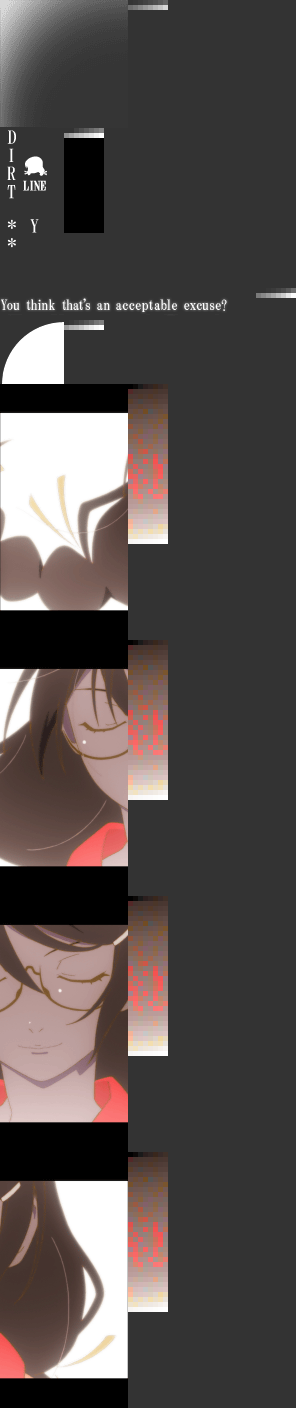
<style>
.page{position:relative;width:296px;height:1408px;background:#333333}
.page>*{position:absolute;margin:0}
.t1{font:18px/24px "HGMinchoB";letter-spacing:0.01em;color:#ffffff}
.t2{font:13px "HGMinchoB";letter-spacing:-0.075em;color:#ffffff;font-weight:bold}
.t3{font:13px "HGMinchoB";letter-spacing:-0.15em;color:#ffffff;font-weight:bold}
.t4{font:13px "HGMinchoB";letter-spacing:-0.05em;color:#ffffff;font-weight:bold}
.t5{font:18px "HGMinchoB";letter-spacing:0.01em;color:#ffffff}
.t6{font:14px "HGMinchoB";letter-spacing:-0.025em;color:#ffffff}
.t7{font:14px "HGMinchoB";letter-spacing:-0.1em;color:#ffffff}
.t8{font:14px "HGMinchoB";letter-spacing:-0.075em;color:#ffffff}
.t9{font:14px "HGMinchoB";letter-spacing:-0.2em;color:#ffffff}
</style>
<div class="page">
<p class="t1" style="left:7px;top:130px;width:9px;height:118px">DIRT  **</p>
<p class="t2" style="left:23px;top:180px;width:23px;height:11px">L<span class="t3">I</span><span class="t4">N</span>E</p>
<p class="t5" style="left:30px;top:219px;width:9px;height:14px">Y</p>
<p class="t6" style="left:1px;top:298px;width:226px;height:14px">You<span class="t7"> t</span><span class="t8">h</span><span class="t7">i</span>nk<span class="t7"> t</span>h<span class="t7">at</span><span class="t9">'</span>s an accepta<span class="t7">b</span>le ex<span class="t8">c</span>use?</p>
</div>
